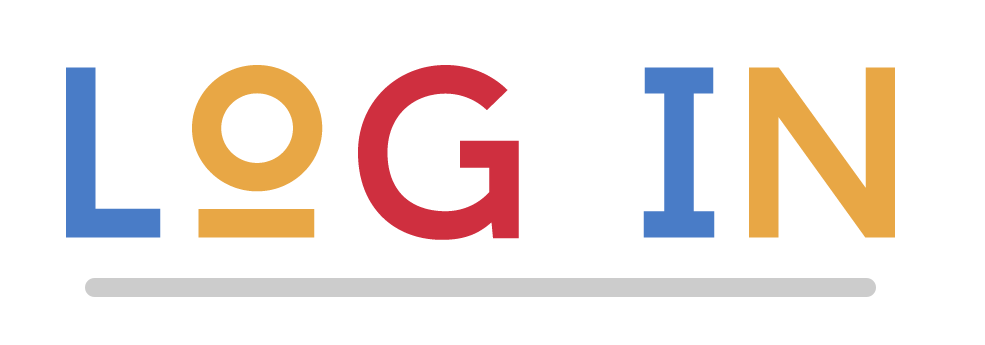
<style>
.page{position:relative;width:985px;height:345px;background:#ffffff}
.page>*{position:absolute;margin:0}
.t1{font:242.5px "BaronNeue";letter-spacing:0.025em;color:#497cc7;scale:1.03 1}
.t2{font:242.5px "BaronNeue";letter-spacing:0.025em;color:#e8a745;scale:1.03 1}
.t3{font:242.5px "BaronNeue";letter-spacing:0.025em;color:#cf2f3f;scale:1.03 1}
</style>
<div class="page">
<p class="t1" style="left:66px;top:65px;width:829px;height:175px">L<span class="t2">O</span><span class="t3">G </span>I<span class="t2">N</span></p>
</div>
